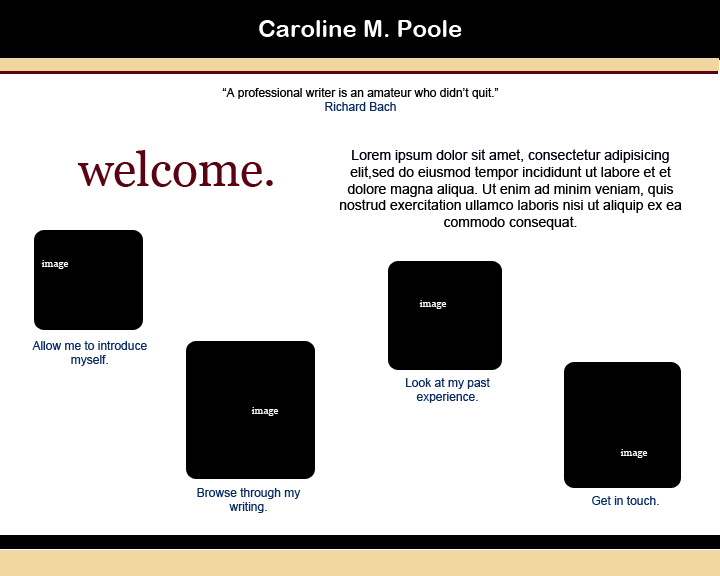
<style>
.page{position:relative;width:720px;height:576px;background:#ffffff}
.page>*{position:absolute;margin:0}
.t1{font:24px "ArialRoundedMTBold";color:#ffffff}
.t2{font:12px "ArialMT";color:#000000}
.t3{font:12px "ArialMT";color:#082b64}
.t4{font:48px "Georgia";color:#5b0311}
.t5{font:14px "ArialMT";color:#000000}
.t6{font:14px "ArialMT";color:#00000f}
.t7{font:10px "Georgia";color:#ffffff}
</style>
<div class="page">
<p class="t1" style="left:259px;top:20px;width:203px;height:17px">Caroline M. Poole</p>
<p class="t2" style="left:222px;top:88px;width:277px;height:23px;text-align:center">“A professional writer is an amateur who didn’t quit.”<br><span class="t3">Richard Bach</span></p>
<p class="t4" style="left:77px;top:150px;width:196px;height:37px">welcome.</p>
<p class="t5" style="left:340px;top:149px;width:342px;height:81px;text-align:center"><span class="t6">Lorem ipsum dolor sit amet, consectetur adipisicing </span>elit,sed do eiusmod tempor incididunt ut labore et et dolore magna aliqua. Ut enim ad minim veniam, quis nostrud exercitation ullamco laboris nisi ut aliquip ex ea commodo consequat.</p>
<p class="t7" style="left:41px;top:260px;width:28px;height:9px">image</p>
<p class="t7" style="left:419px;top:300px;width:28px;height:9px">image</p>
<p class="t3" style="left:32px;top:341px;width:115px;height:25px;text-align:center">Allow me to introduce myself.</p>
<p class="t3" style="left:406px;top:378px;width:84px;height:25px;text-align:center">Look at my past experience.</p>
<p class="t7" style="left:251px;top:407px;width:28px;height:9px">image</p>
<p class="t7" style="left:620px;top:449px;width:28px;height:9px">image</p>
<p class="t3" style="left:197px;top:488px;width:104px;height:25px;text-align:center">Browse through my writing.</p>
<p class="t3" style="left:592px;top:496px;width:67px;height:9px">Get in touch.</p>
</div>
